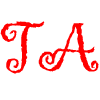
<style>
.page{position:relative;width:100px;height:100px;background:#ffffff}
.page>*{position:absolute;margin:0}
.t1{font:72px "Gigi-Regular";color:#ff0000}
</style>
<div class="page">
<p class="t1" style="left:0px;top:21px;width:99px;height:53px">TA</p>
</div>
